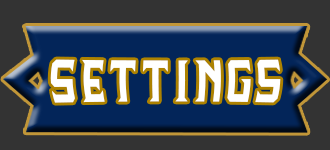
<style>
.page{position:relative;width:330px;height:150px;background:#333333}
.page>*{position:absolute;margin:0}
.t1{font:62.5px "Lorde-Havana";letter-spacing:0.1em;color:#ffffff;scale:0.75 1}
</style>
<div class="page">
<p class="t1" style="left:50px;top:59px;width:231px;height:44px">Settings</p>
</div>
